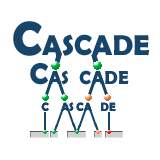
<style>
.page{position:relative;width:160px;height:160px;background:#ffffff}
.page>*{position:absolute;margin:0}
.t1{font:29px "BerlinSansFBDemi-Bold";color:#17456a}
.t2{font:48px "BerlinSansFBDemi-Bold";color:#17456a}
.t3{font:19px "BerlinSansFBDemi-Bold";color:#17456a}
.t4{font:30px "BerlinSansFBDemi-Bold";color:#17456a}
.t5{font:12px "BerlinSansFBDemi-Bold";color:#17456a}
</style>
<div class="page">
<p class="t1" style="left:13px;top:21px;width:136px;height:35px"><span class="t2">C</span>ASCADE</p>
<p class="t3" style="left:30px;top:63px;width:38px;height:22px"><span class="t4">C</span>AS</p>
<p class="t3" style="left:79px;top:70px;width:50px;height:15px">CADE</p>
<p class="t5" style="left:41px;top:102px;width:33px;height:9px">C    AS</p>
<p class="t5" style="left:76px;top:102px;width:16px;height:9px">CA</p>
<p class="t5" style="left:101px;top:102px;width:15px;height:9px">DE</p>
</div>
